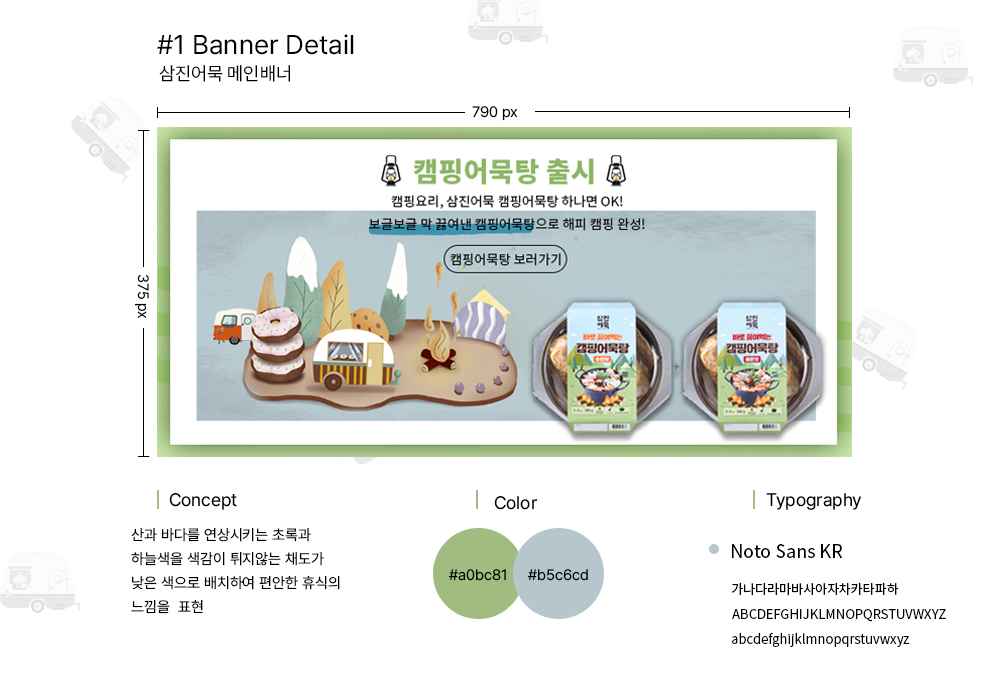
<style>
.page{position:relative;width:1000px;height:700px;background:#ffffff}
.page>*{position:absolute;margin:0}
.t1{font:27px "Pretendard-Regular";color:#000000}
.t2{font:18.7px "Pretendard-Regular";color:#000000}
.t3{font:15px "Pretendard-Regular";color:#000000}
.t4{font:18px "Pretendard-Regular";color:#000000}
.t5{font:15px/24px "Pretendard-Regular";color:#000000}
.t6{font:18px "NotoSansKR-Regular";color:#000000}
.t7{font:13px "NotoSansKR-Regular";color:#000000}
</style>
<div class="page">
<p class="t1" style="left:157px;top:34px;width:197px;height:21px">#1 Banner Detail</p>
<p class="t2" style="left:159px;top:65px;width:131px;height:17px">삼진어묵 메인배너</p>
<p class="t3" style="left:472px;top:106px;width:46px;height:15px">790 px</p>
<p class="t3" style="left:134px;top:274px;width:15px;height:44px;rotate:90deg">375 px</p>
<p class="t4" style="left:169px;top:493px;width:68px;height:17px">Concept</p>
<p class="t4" style="left:494px;top:496px;width:44px;height:14px">Color</p>
<p class="t4" style="left:766px;top:493px;width:96px;height:17px">Typography</p>
<p class="t5" style="left:131px;top:528px;width:209px;height:86px">산과 바다를 연상시키는 초록과<br>하늘색을 색감이 튀지않는 채도가<br>낮은 색으로 배치하여 편안한 휴식의<br>느낌을  표현</p>
<p class="t6" style="left:732px;top:544px;width:111px;height:14px">Noto Sans KR</p>
<p class="t3" style="left:449px;top:569px;width:57px;height:12px">#a0bc81</p>
<p class="t3" style="left:528px;top:569px;width:60px;height:12px">#b5c6cd</p>
<p class="t7" style="left:731px;top:582px;width:168px;height:14px">가나다라마바사아자차카타파하</p>
<p class="t7" style="left:732px;top:609px;width:214px;height:13px">ABCDEFGHIJKLMNOPQRSTUVWXYZ</p>
<p class="t7" style="left:732px;top:632px;width:177px;height:15px">abcdefghijklmnopqrstuvwxyz</p>
</div>
